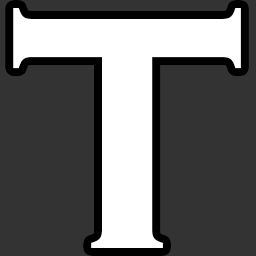
<style>
.page{position:relative;width:256px;height:256px;background:#333333}
.page>*{position:absolute;margin:0}
.t1{font:344px "CopperplateGothic-Bold";color:#ffffff}
</style>
<div class="page">
<p class="t1" style="left:13px;top:8px;width:228px;height:240px">T</p>
</div>
